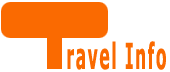
<style>
.page{position:relative;width:170px;height:72px;background:#ffffff}
.page>*{position:absolute;margin:0}
.t1{font:36px "Verdana-Bold";letter-spacing:0.1em;color:#fa6a01;scale:0.43 1}
</style>
<div class="page">
<p class="t1" style="left:67px;top:41px;width:99px;height:29px">ravel Info</p>
</div>
